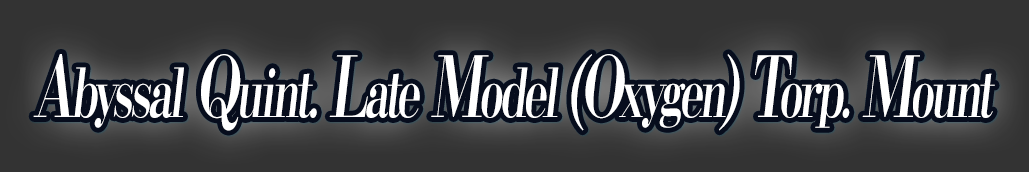
<style>
.page{position:relative;width:1029px;height:172px;background:#333333}
.page>*{position:absolute;margin:0}
.t1{font:67.2px "KochoStd-Heavy";letter-spacing:-0.08em;color:#ffffff;font-style:italic;scale:0.66 1}
.t2{font:84px "KochoStd-Heavy";letter-spacing:-0.08em;color:#ffffff;font-style:italic;scale:0.66 1}
</style>
<div class="page">
<p class="t1" style="left:33px;top:54px;width:962px;height:77px"><span class="t2">A</span>byssal<span class="t2"> Q</span>uint.<span class="t2"> L</span>ate<span class="t2"> M</span>odel <span class="t2">(O</span>xygen<span class="t2">) T</span>orp.<span class="t2"> M</span>ount</p>
</div>
